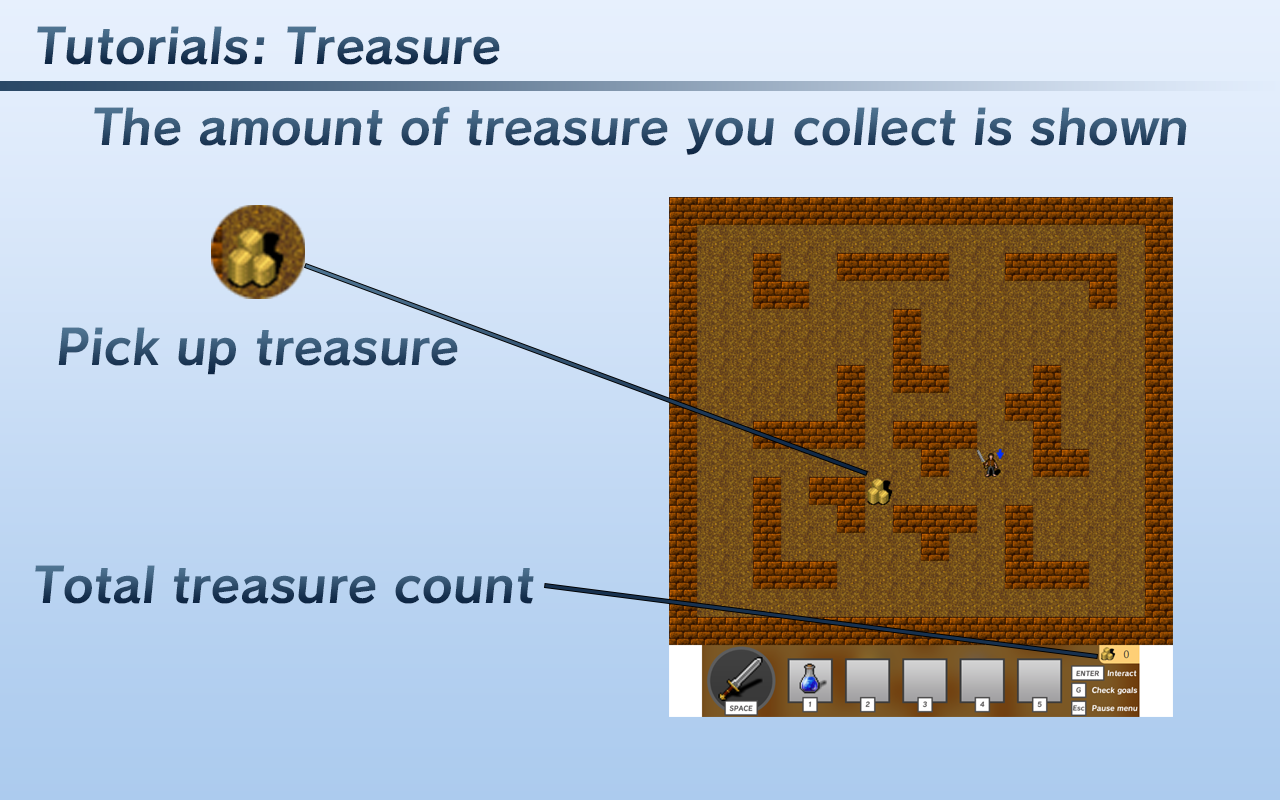
<style>
.page{position:relative;width:1280px;height:800px}
.page>*{position:absolute;margin:0}
.t1{font:48px "Calamity-Bold"}
.t2{font:48px "Calamity-Bold";color:#2f4e6c}
</style>
<div class="page">
<p class="t1" style="left:37px;top:26px;width:463px;height:39px">Tutorials: Treasure</p>
<p class="t2" style="left:94px;top:106px;width:1093px;height:49px">The amount of treasure you collect is shown</p>
<p class="t1" style="left:58px;top:327px;width:400px;height:48px">Pick up treasure</p>
<p class="t1" style="left:35px;top:565px;width:499px;height:39px">Total treasure count</p>
</div>
